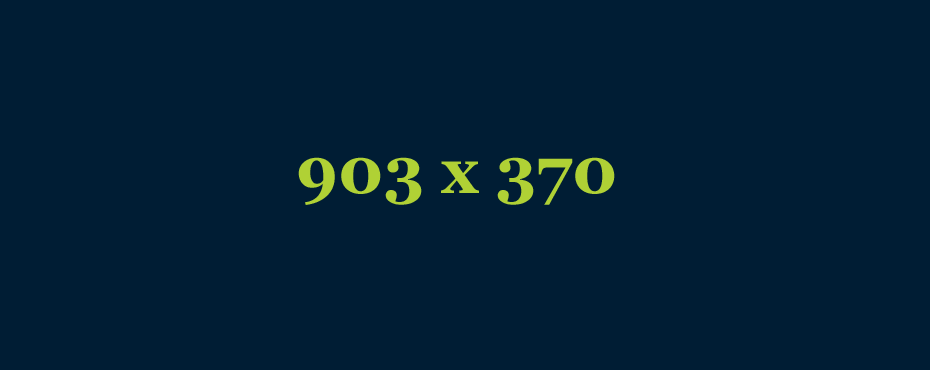
<style>
.page{position:relative;width:930px;height:370px;background:#001d34}
.page>*{position:absolute;margin:0}
.t1{font:65px "Georgia-Bold";color:#b0d135}
</style>
<div class="page">
<p class="t1" style="left:298px;top:157px;width:317px;height:48px">903 x 370</p>
</div>
